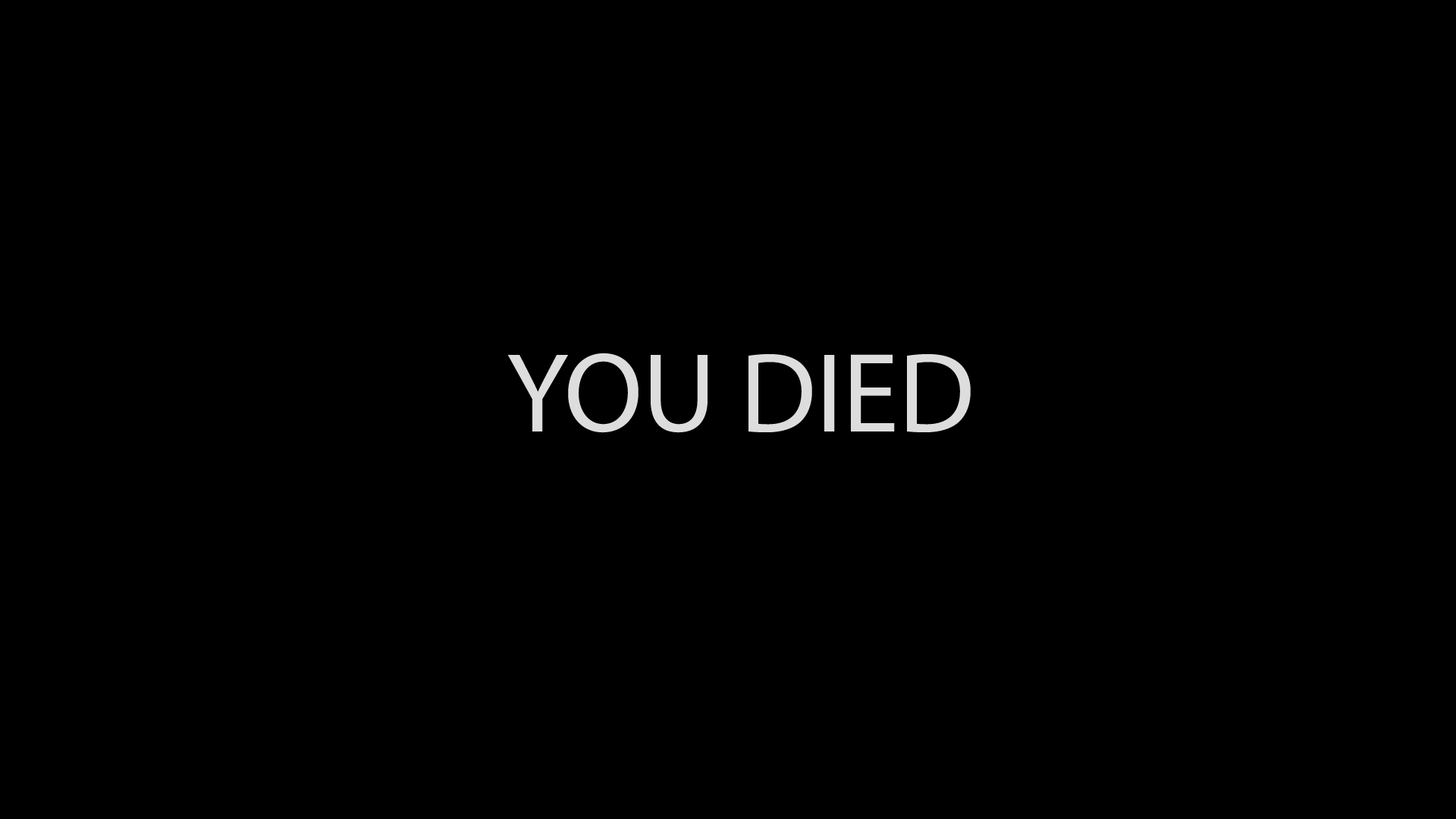
<style>
.page{position:relative;width:1456px;height:819px;background:#000000}
.page>*{position:absolute;margin:0}
.t1{font:113.7px "MyriadPro-Regular";color:#dddddd}
</style>
<div class="page">
<p class="t1" style="left:507px;top:353px;width:464px;height:80px">YOU DIED</p>
</div>
